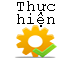
<style>
.page{position:relative;width:71px;height:58px;background:#ffffff}
.page>*{position:absolute;margin:0}
.t1{font:12px/13.3px "CourierNewPSMT";color:#000000}
</style>
<div class="page">
<p class="t1" style="left:17px;top:1px;width:38px;height:26px;text-align:center">Thực<br>hiện</p>
</div>
